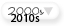
<style>
.page{position:relative;width:64px;height:26px;background:#ffffff}
.page>*{position:absolute;margin:0}
.t1{font:12px "MyriadPro-Regular";color:#000000}
</style>
<div class="page">
<p class="t1" style="left:11px;top:14px;width:29px;height:8px">2010s</p>
</div>
